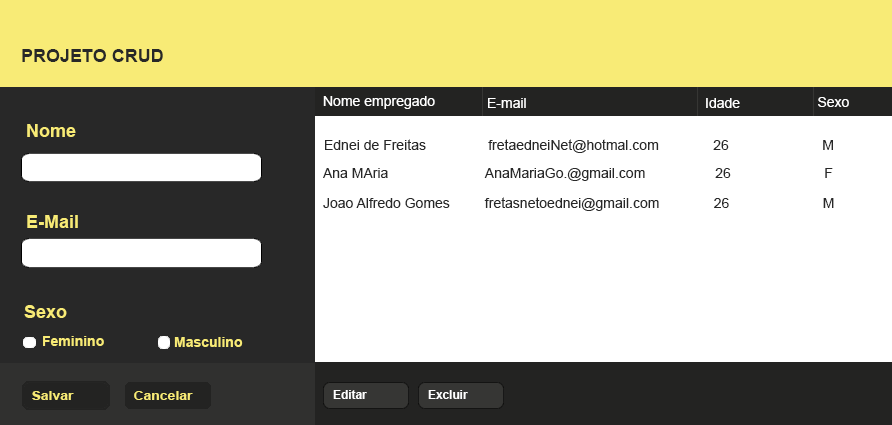
<style>
.page{position:relative;width:892px;height:425px;background:#ffffff}
.page>*{position:absolute;margin:0}
.t1{font:18px "Arial-BoldMT";color:#282828}
.t2{font:14px "ArialMT";color:#ffffff}
.t3{font:18px "Arial-BoldMT";color:#f8eb76}
.t4{font:14px "ArialMT";color:#282828}
.t5{font:14px "Arial-BoldMT";color:#f8eb76}
.t6{font:11.8px "Arial-BoldMT";color:#ffffff}
.t7{font:11.9px "Arial-BoldMT";color:#f8eb76;scale:1.18 1}
</style>
<div class="page">
<p class="t1" style="left:22px;top:49px;width:141px;height:13px">PROJETO CRUD</p>
<p class="t2" style="left:323px;top:96px;width:112px;height:13px">Nome empregado</p>
<p class="t2" style="left:488px;top:98px;width:38px;height:10px">E-mail</p>
<p class="t2" style="left:706px;top:98px;width:34px;height:10px">Idade</p>
<p class="t2" style="left:818px;top:97px;width:31px;height:10px">Sexo</p>
<p class="t3" style="left:27px;top:124px;width:49px;height:13px">Nome</p>
<p class="t4" style="left:325px;top:139px;width:508px;height:14px">Ednei de Freitas                fretaedneiNet@hotmal.com              26                        M</p>
<p class="t4" style="left:323px;top:168px;width:510px;height:13px">Ana MAria                         AnaMariaGo.@gmail.com                  26                        F</p>
<p class="t4" style="left:323px;top:197px;width:511px;height:14px">Joao Alfredo Gomes         fretasnetoednei@gmail.com              26                        M</p>
<p class="t3" style="left:27px;top:215px;width:51px;height:13px">E-Mail</p>
<p class="t3" style="left:24px;top:305px;width:43px;height:13px">Sexo</p>
<p class="t5" style="left:43px;top:336px;width:61px;height:10px">Feminino</p>
<p class="t5" style="left:174px;top:337px;width:69px;height:10px">Masculino</p>
<p class="t6" style="left:333px;top:390px;width:34px;height:9px">Editar</p>
<p class="t6" style="left:428px;top:390px;width:40px;height:9px">Excluir</p>
<p class="t7" style="left:32px;top:391px;width:42px;height:9px">Salvar</p>
<p class="t7" style="left:134px;top:391px;width:59px;height:9px">Cancelar</p>
</div>
